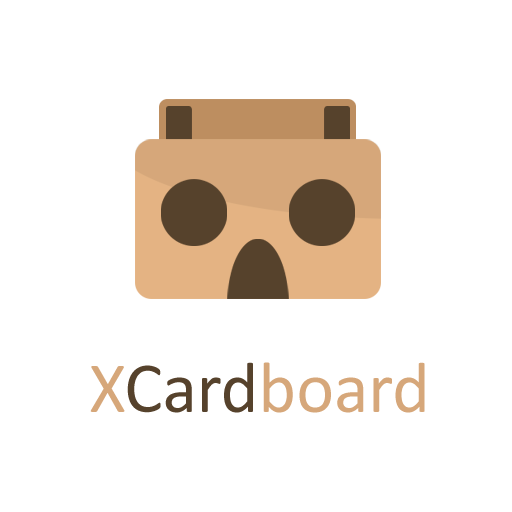
<style>
.page{position:relative;width:512px;height:512px;background:#ffffff}
.page>*{position:absolute;margin:0}
.t1{font:72.1px "Calibri";color:#d6a77a}
.t2{font:72.1px "Calibri";color:#56422c}
</style>
<div class="page">
<p class="t1" style="left:90px;top:362px;width:335px;height:51px">X<span class="t2">Card</span>board</p>
</div>
